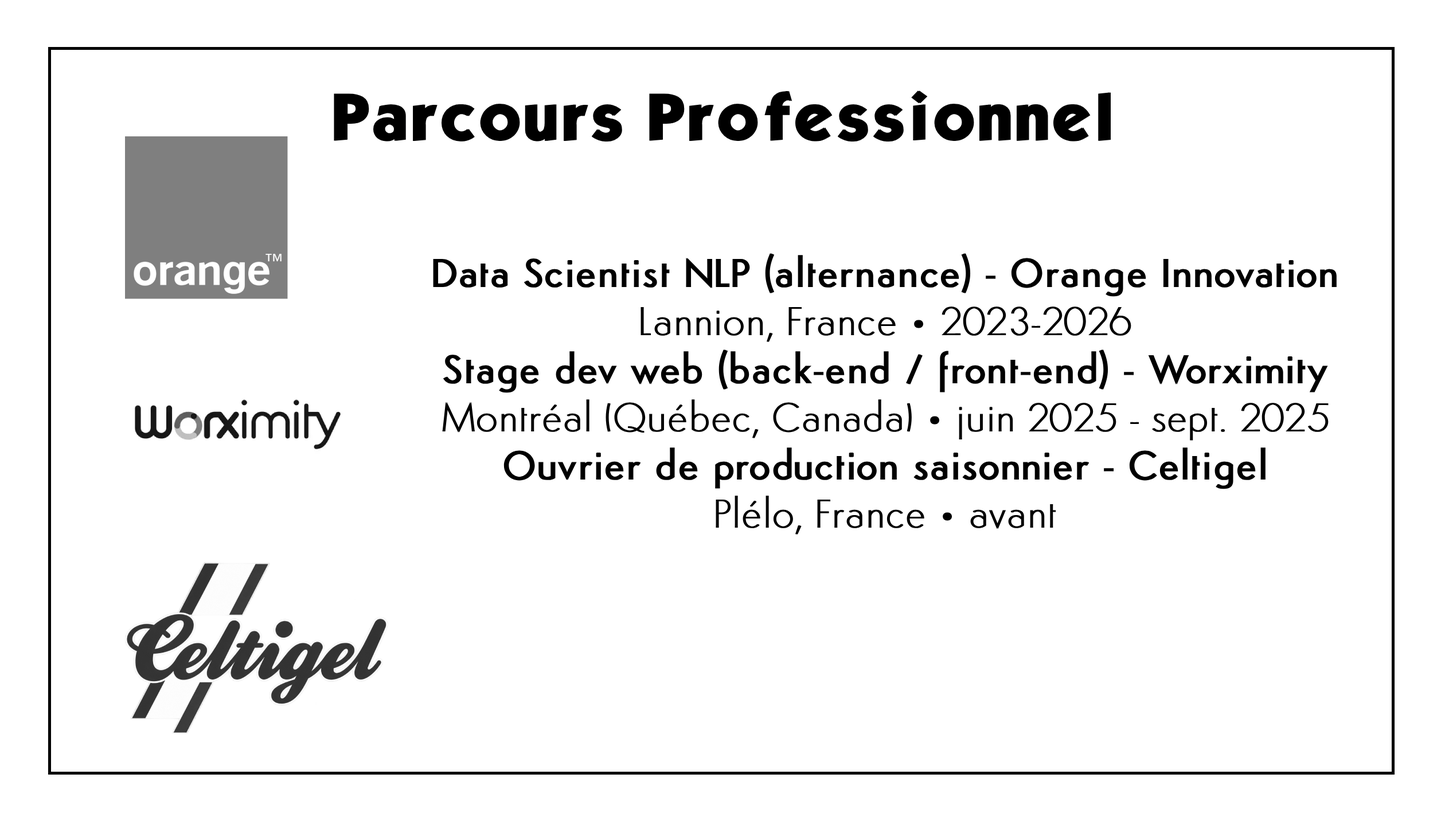
<style>
.page{position:relative;width:1445px;height:825px;background:#ffffff}
.page>*{position:absolute;margin:0}
.t1{font:57.3px "KabelBdNormal";color:#000000;font-weight:bold}
.t2{font:40.1px "Semplicita-Medium";color:#000000;font-weight:bold}
.t3{font:40.1px "Semplicita-Light";color:#000000;font-weight:bold}
</style>
<div class="page">
<p class="t1" style="left:334px;top:91px;width:777px;height:51px">Parcours Professionnel</p>
<p class="t2" style="left:433px;top:253px;width:903px;height:282px;text-align:center">Data Scientist NLP (alternance) - Orange Innovation<span class="t3"><br>Lannion, France • 2023-2026<br></span>Stage dev web (back-end / front-end) - Worximity<span class="t3"> Montréal (Québec, Canada) • juin 2025 - sept. 2025<br></span>Ouvrier de production saisonnier - Celtigel<span class="t3"><br>Plélo, France • avant</span></p>
</div>
